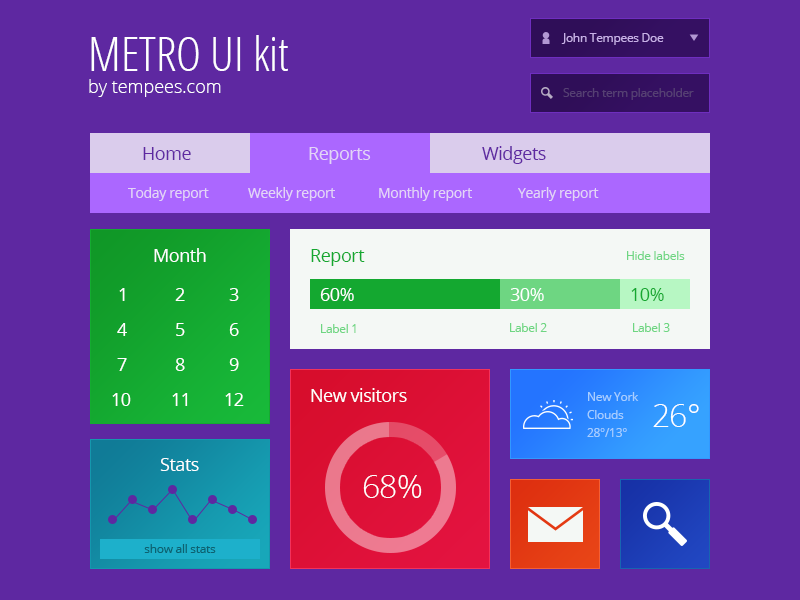
<style>
.page{position:relative;width:800px;height:600px;background:#5e28a1}
.page>*{position:absolute;margin:0}
.t1{font:18px "OpenSans-Light";color:#ffffff}
.t2{font:48px "OpenSans-CondensedLight";color:#ffffff}
.t3{font:12px "OpenSans";letter-spacing:-0.025em;color:#c8b0e8}
.t4{font:12px "OpenSans";letter-spacing:-0.025em;color:#564073}
.t5{font:18px "OpenSans";letter-spacing:-0.025em;color:#5e28a1}
.t6{font:18px "OpenSans";letter-spacing:-0.025em;color:#e3d4f6}
.t7{font:14px "OpenSans";letter-spacing:-0.025em;color:#e3d4f6}
.t8{font:18px "OpenSans";letter-spacing:-0.025em;color:#ffffff}
.t9{font:18px "OpenSans";letter-spacing:-0.025em;color:#14a830}
.t10{font:12px "OpenSans";letter-spacing:-0.025em;color:#6ed682}
.t11{font:12px/18px "OpenSans";letter-spacing:-0.025em;color:#a7ceff}
.t12{font:32px "OpenSans-Light";letter-spacing:-0.025em;color:#ffffff}
.t13{font:12px "OpenSans";letter-spacing:-0.025em;color:#0d6170}
</style>
<div class="page">
<p class="t1" style="left:89px;top:35px;width:199px;height:62px"><span class="t2">METRO UI kit<br></span>by tempees.com</p>
<p class="t3" style="left:561px;top:33px;width:103px;height:12px">John Tempees Doe</p>
<p class="t4" style="left:563px;top:88px;width:131px;height:12px">Search term placeholder</p>
<p class="t5" style="left:143px;top:147px;width:48px;height:13px">Home</p>
<p class="t6" style="left:309px;top:147px;width:62px;height:17px">Reports</p>
<p class="t5" style="left:482px;top:146px;width:64px;height:18px">Widgets</p>
<p class="t7" style="left:128px;top:187px;width:81px;height:14px">Today report</p>
<p class="t7" style="left:248px;top:187px;width:87px;height:14px">Weekly report</p>
<p class="t7" style="left:379px;top:187px;width:93px;height:14px">Monthly report</p>
<p class="t7" style="left:518px;top:187px;width:81px;height:14px">Yearly report</p>
<p class="t8" style="left:154px;top:248px;width:52px;height:14px">Month</p>
<p class="t9" style="left:311px;top:249px;width:54px;height:17px">Report</p>
<p class="t10" style="left:627px;top:251px;width:58px;height:9px">Hide labels</p>
<p class="t8" style="left:119px;top:288px;width:6px;height:13px">1</p>
<p class="t8" style="left:175px;top:288px;width:10px;height:13px">2</p>
<p class="t8" style="left:229px;top:288px;width:10px;height:13px">3</p>
<p class="t8" style="left:320px;top:288px;width:34px;height:13px">60%</p>
<p class="t8" style="left:510px;top:288px;width:34px;height:13px">30%</p>
<p class="t9" style="left:631px;top:288px;width:33px;height:13px">10%</p>
<p class="t8" style="left:117px;top:323px;width:10px;height:13px">4</p>
<p class="t8" style="left:176px;top:323px;width:9px;height:13px">5</p>
<p class="t8" style="left:229px;top:323px;width:10px;height:13px">6</p>
<p class="t10" style="left:321px;top:324px;width:35px;height:9px">Label 1</p>
<p class="t10" style="left:510px;top:323px;width:37px;height:9px">Label 2</p>
<p class="t10" style="left:633px;top:323px;width:37px;height:9px">Label 3</p>
<p class="t8" style="left:117px;top:358px;width:10px;height:13px">7</p>
<p class="t8" style="left:175px;top:358px;width:10px;height:13px">8</p>
<p class="t8" style="left:229px;top:358px;width:10px;height:13px">9</p>
<p class="t8" style="left:311px;top:388px;width:96px;height:14px">New visitors</p>
<p class="t8" style="left:112px;top:393px;width:19px;height:13px">10</p>
<p class="t8" style="left:172px;top:393px;width:16px;height:13px">11</p>
<p class="t8" style="left:225px;top:393px;width:19px;height:13px">12</p>
<p class="t11" style="left:587px;top:392px;width:52px;height:45px">New York<br>Clouds<br>28°/13°</p>
<p class="t12" style="left:653px;top:404px;width:46px;height:23px">26°</p>
<p class="t8" style="left:160px;top:458px;width:39px;height:13px">Stats</p>
<p class="t12" style="left:363px;top:475px;width:59px;height:23px">68%</p>
<p class="t13" style="left:144px;top:544px;width:72px;height:9px">show all stats</p>
</div>
